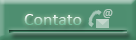
<style>
.page{position:relative;width:136px;height:40px;background:#4e8e70}
.page>*{position:absolute;margin:0}
.t1{font:18px "Calibri"}
.t2{font:12px "Calibri";color:#b4cbbf}
</style>
<div class="page">
<p class="t1" style="left:24px;top:14px;width:58px;height:11px">Contato</p>
<p class="t2" style="left:103px;top:9px;width:10px;height:9px">@</p>
</div>
